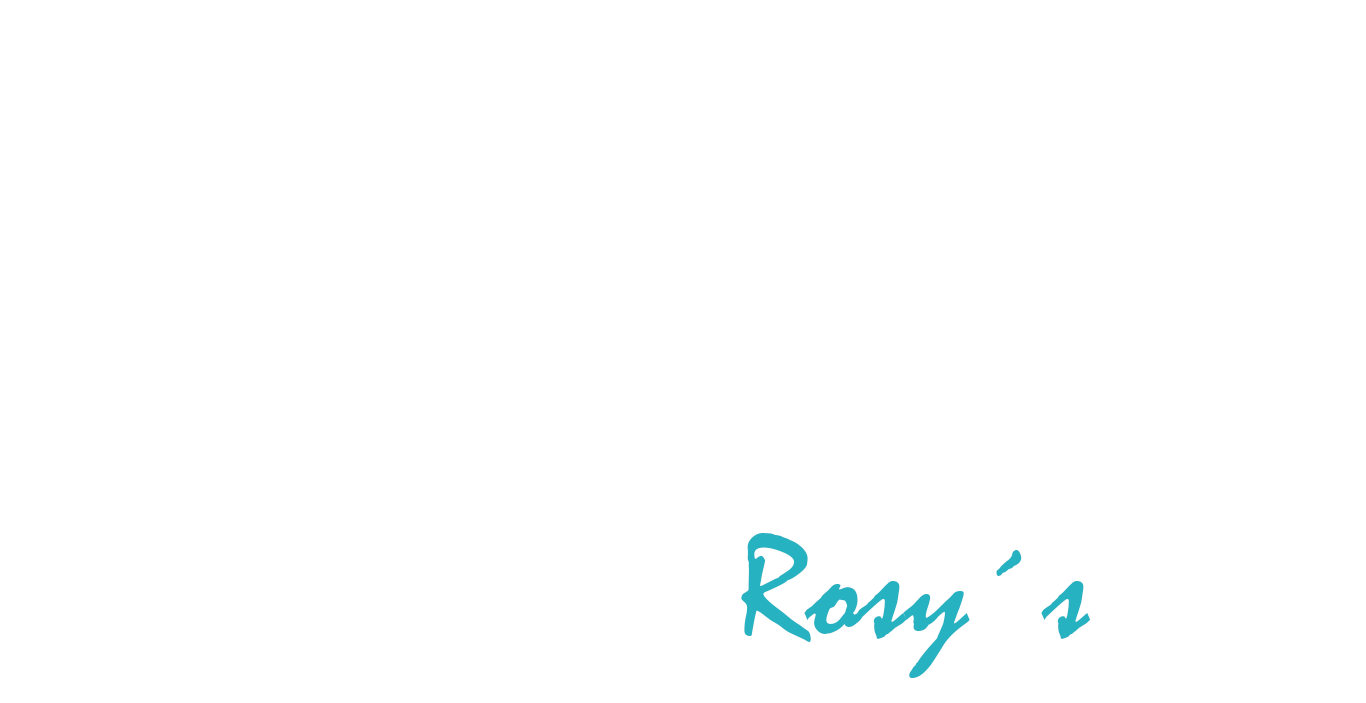
<style>
.page{position:relative;width:1366px;height:703px;background:#ffffff}
.page>*{position:absolute;margin:0}
.t1{font:150px "Mistral";color:#27b2c2}
</style>
<div class="page">
<p class="t1" style="left:741px;top:533px;width:350px;height:145px">Rosy´s</p>
</div>
